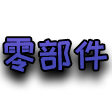
<style>
.page{position:relative;width:112px;height:112px;background:#ffffff}
.page>*{position:absolute;margin:0}
.t1{font:36px "HappyZcool-2016";color:#4e4dbd}
</style>
<div class="page">
<p class="t1" style="left:4px;top:38px;width:103px;height:34px">零部件</p>
</div>
